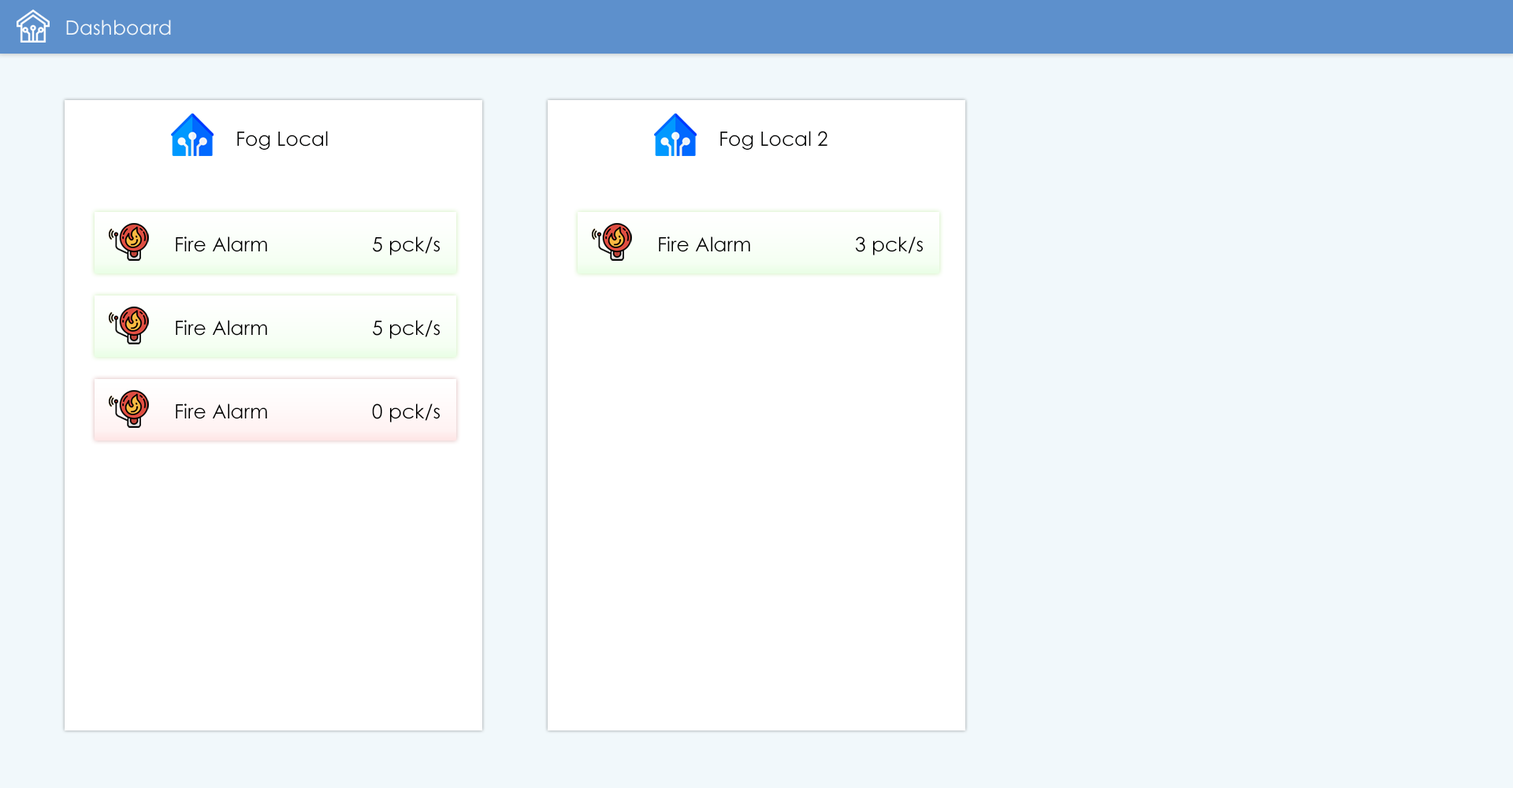
<style>
.page{position:relative;width:1513px;height:788px;background:#f1f8fb}
.page>*{position:absolute;margin:0}
.t1{font:19.7px "CenturyGothic";color:#f0f7fb}
.t2{font:19.7px "CenturyGothic";color:#000101}
.t3{font:19.7px "CenturyGothic";color:#000000}
</style>
<div class="page">
<p class="t1" style="left:66px;top:20px;width:105px;height:15px">Dashboard</p>
<p class="t2" style="left:237px;top:131px;width:91px;height:19px">Fog Local</p>
<p class="t2" style="left:720px;top:131px;width:107px;height:19px">Fog Local 2</p>
<p class="t3" style="left:176px;top:236px;width:91px;height:16px">Fire Alarm</p>
<p class="t3" style="left:373px;top:236px;width:67px;height:19px">5 pck/s</p>
<p class="t3" style="left:659px;top:236px;width:91px;height:16px">Fire Alarm</p>
<p class="t3" style="left:855px;top:236px;width:68px;height:19px">3 pck/s</p>
<p class="t3" style="left:176px;top:320px;width:91px;height:16px">Fire Alarm</p>
<p class="t3" style="left:373px;top:320px;width:67px;height:19px">5 pck/s</p>
<p class="t3" style="left:176px;top:403px;width:91px;height:16px">Fire Alarm</p>
<p class="t3" style="left:372px;top:403px;width:68px;height:19px">0 pck/s</p>
</div>
